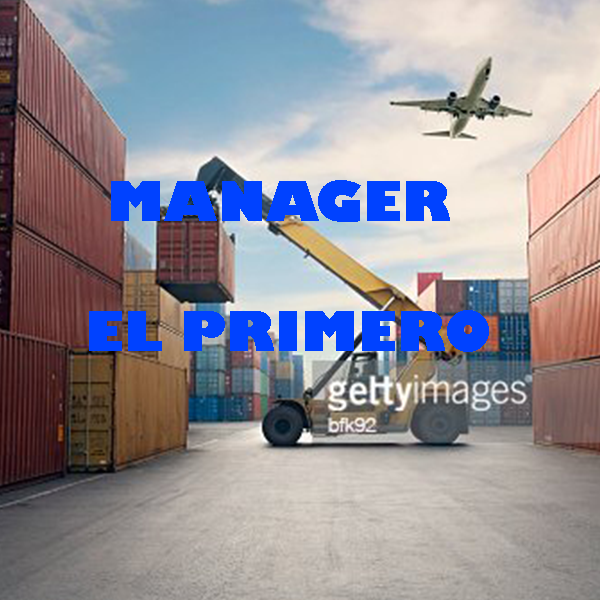
<style>
.page{position:relative;width:600px;height:600px}
.page>*{position:absolute;margin:0}
.t1{font:54.2px "GillSans-UltraBold";letter-spacing:0.005em;color:#0042ff;text-transform:uppercase}
</style>
<div class="page">
<p class="t1" style="left:89px;top:180px;width:400px;height:172px;text-align:center">manager <br>el primero</p>
</div>
